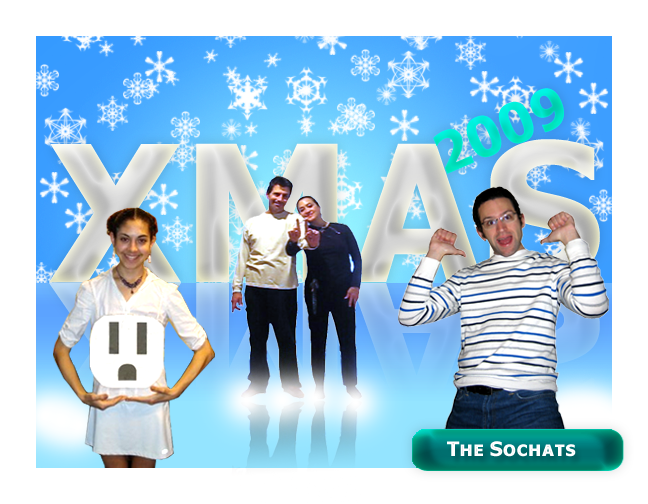
<style>
.page{position:relative;width:648px;height:504px;background:#ffffff}
.page>*{position:absolute;margin:0}
.t1{font:55.1px "TahomaSmallCap-Bold";color:#00e6ca}
.t2{font:190px "TahomaSmallCap-Bold"}
.t3{font:20px "TahomaSmallCap-Bold";color:#ffffff}
</style>
<div class="page">
<p class="t1" style="left:433px;top:88px;width:131px;height:86px;rotate:-23deg">2009</p>
<p class="t2" style="left:49px;top:144px;width:132px;height:139px">X</p>
<p class="t2" style="left:351px;top:143px;width:132px;height:139px">A</p>
<p class="t2" style="left:489px;top:139px;width:111px;height:144px">S</p>
<p class="t3" style="left:447px;top:441px;width:129px;height:16px">The Sochats</p>
</div>
